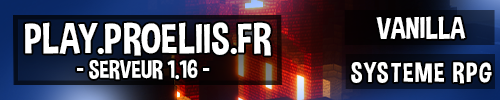
<style>
.page{position:relative;width:500px;height:100px}
.page>*{position:absolute;margin:0}
.t1{font:30.8px "DimboRegular";color:#ffffff}
.t2{font:42.5px "DimboRegular";color:#ffffff}
.t3{font:25px "DimboRegular";color:#ffffff}
.t4{font:27.5px "DimboRegular";letter-spacing:0.05em;color:#ffffff}
</style>
<div class="page">
<p class="t1" style="left:376px;top:16px;width:90px;height:23px">VANILLA</p>
<p class="t2" style="left:25px;top:22px;width:246px;height:34px">PLAY.PROELIIS.FR</p>
<p class="t3" style="left:77px;top:59px;width:133px;height:21px">- SERVEUR 1.16 -</p>
<p class="t4" style="left:351px;top:62px;width:141px;height:22px">SYSTEME RPG</p>
</div>
